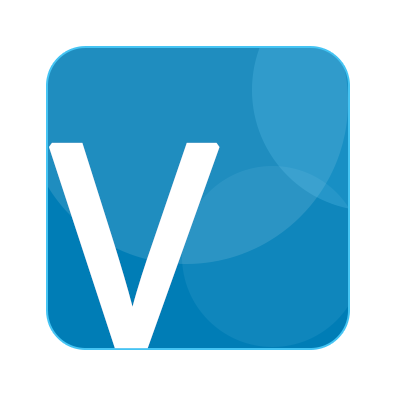
<style>
.page{position:relative;width:400px;height:400px;background:#ffffff}
.page>*{position:absolute;margin:0}
.t1{font:294.8px "MyriadPro-Regular";color:#ffffff;font-weight:bold}
</style>
<div class="page">
<p class="t1" style="left:49px;top:142px;width:171px;height:207px">V</p>
</div>
